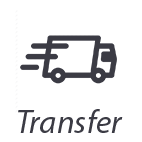
<style>
.page{position:relative;width:142px;height:142px;background:#ffffff}
.page>*{position:absolute;margin:0}
.t1{font:33px "MyriadPro-It";color:#3b3b44}
</style>
<div class="page">
<p class="t1" style="left:18px;top:109px;width:105px;height:24px">Transfer</p>
</div>
